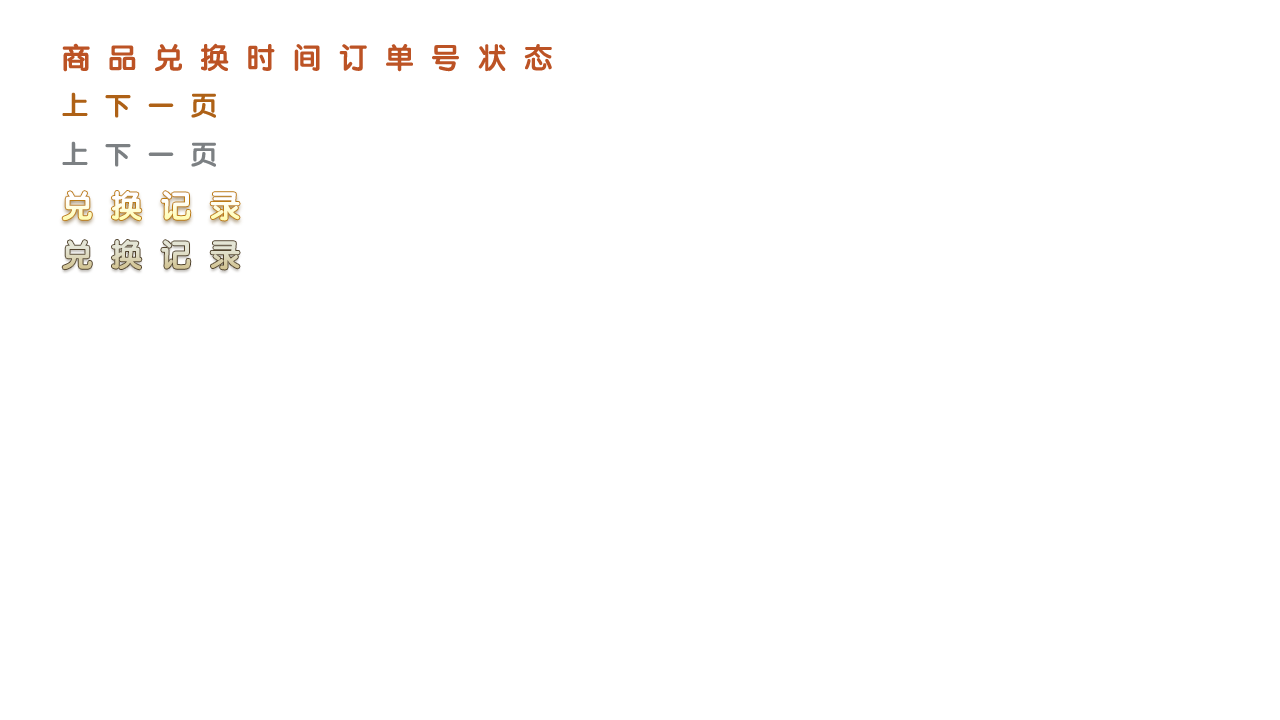
<style>
.page{position:relative;width:1280px;height:720px;background:#ffffff}
.page>*{position:absolute;margin:0}
.t1{font:28px "STYuanti-SC-Bold";letter-spacing:0.2em;color:#bc5325}
.t2{font:26px "STYuanti-SC-Bold";letter-spacing:0.2em;color:#ae6116}
.t3{font:26px "STYuanti-SC-Bold";letter-spacing:0.2em;color:#7c8083}
.t4{font:30px "STYuanti-SC-Bold";letter-spacing:0.2em}
</style>
<div class="page">
<p class="t1" style="left:62px;top:43px;width:490px;height:29px">商 品 兑 换 时 间 订 单 号 状 态</p>
<p class="t2" style="left:62px;top:92px;width:154px;height:26px">上 下 一 页</p>
<p class="t3" style="left:62px;top:141px;width:154px;height:26px">上 下 一 页</p>
<p class="t4" style="left:62px;top:191px;width:178px;height:30px">兑 换 记 录</p>
</div>
